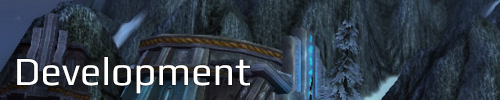
<style>
.page{position:relative;width:500px;height:100px}
.page>*{position:absolute;margin:0}
.t1{font:40px "Play-Regular";letter-spacing:0.01em;color:#ffffff;scale:0.97 1}
</style>
<div class="page">
<p class="t1" style="left:17px;top:57px;width:233px;height:37px">Development</p>
</div>
